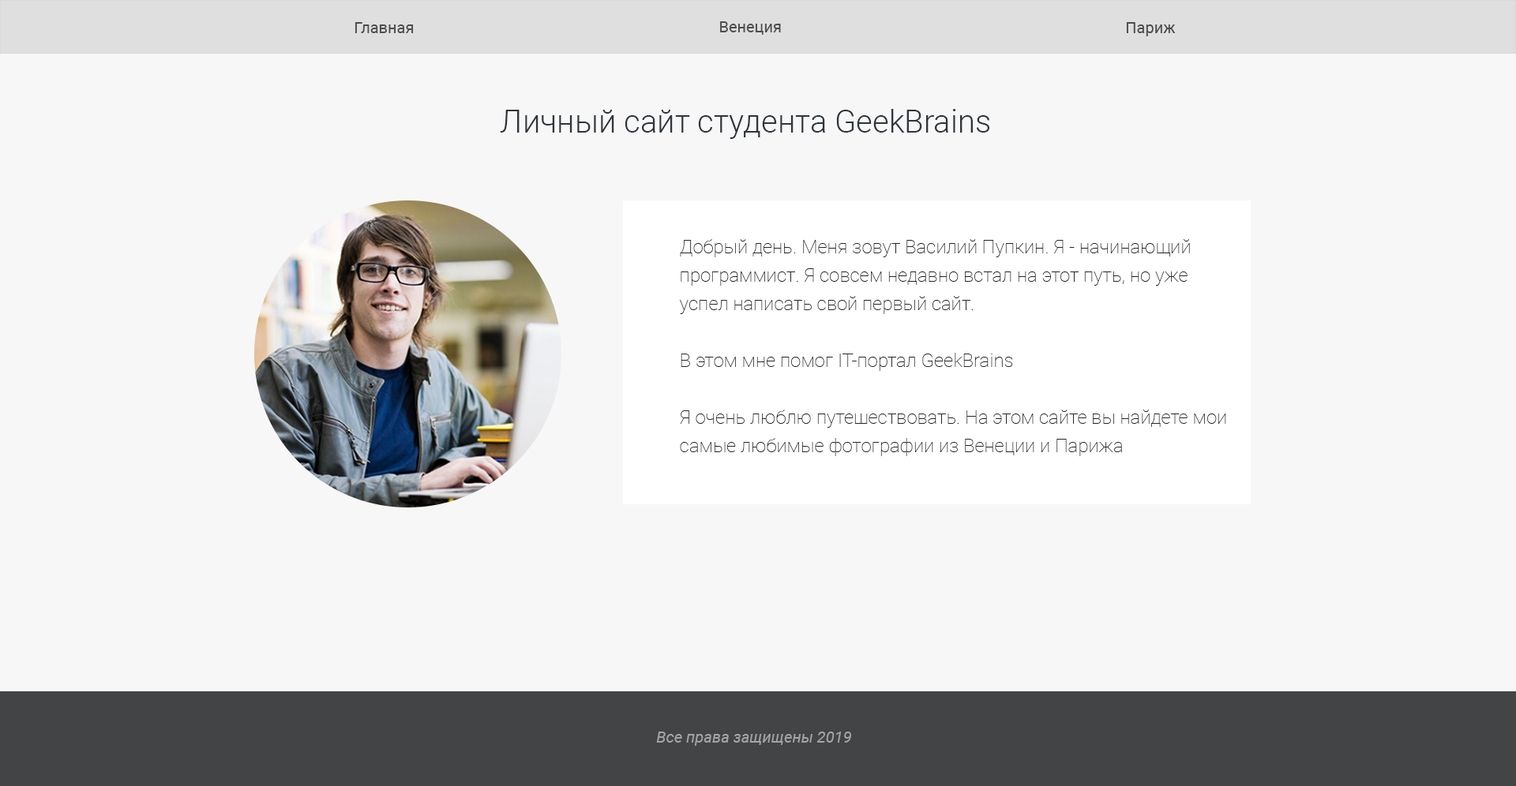
<style>
.page{position:relative;width:1516px;height:786px;background:#f7f7f7}
.page>*{position:absolute;margin:0}
.t1{font:15.8px "Roboto-Regular";color:#4d4d4d}
.t2{font:31.6px "Roboto-Light";color:#2e353d}
.t3{font:19px/28.4px "Roboto-Thin";color:#242424}
.t4{font:19px "Roboto-Thin";color:#242424}
.t5{font:15.8px "Roboto-Italic";color:#a4a4a4}
</style>
<div class="page">
<p class="t1" style="left:355px;top:22px;width:59px;height:11px">Главная</p>
<p class="t1" style="left:720px;top:21px;width:61px;height:14px">Венеция</p>
<p class="t1" style="left:1126px;top:22px;width:50px;height:14px">Париж</p>
<p class="t2" style="left:500px;top:109px;width:489px;height:30px">Личный сайт студента GeekBrains</p>
<p class="t3" style="left:679px;top:239px;width:547px;height:217px"><span class="t4"><br></span>Добрый день. Меня зовут Василий Пупкин. Я - начинающий программист. Я совсем недавно встал на этот путь, но уже успел написать свой первый сайт.<br><br>В этом мне помог IT-портал GeekBrains<br><br>Я очень люблю путешествовать. На этом сайте вы найдете мои самые любимые фотографии из Венеции и Парижа</p>
<p class="t5" style="left:656px;top:732px;width:195px;height:14px">Все права защищены 2019</p>
</div>
